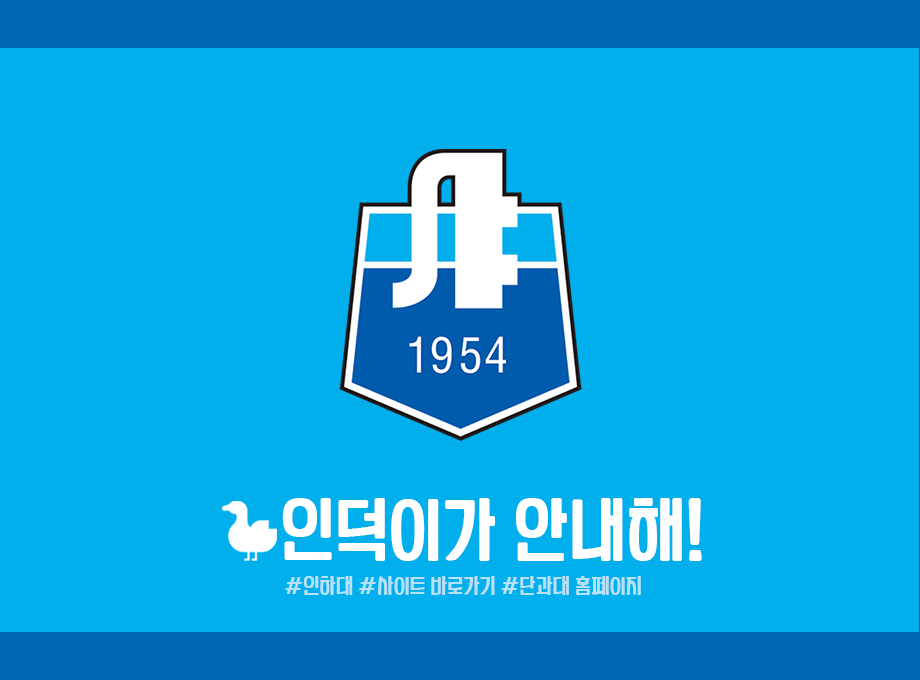
<style>
.page{position:relative;width:920px;height:680px;background:#00afec}
.page>*{position:absolute;margin:0}
.t1{font:62.7px "YANGJIN";color:#ffffff}
.t2{font:18.8px "YANGJIN";color:#b8e1f8}
</style>
<div class="page">
<p class="t1" style="left:282px;top:498px;width:420px;height:63px">인덕이가 안내해!</p>
<p class="t2" style="left:285px;top:576px;width:356px;height:19px">#인하대 #사이트 바로가기 #단과대 홈페이지</p>
</div>
